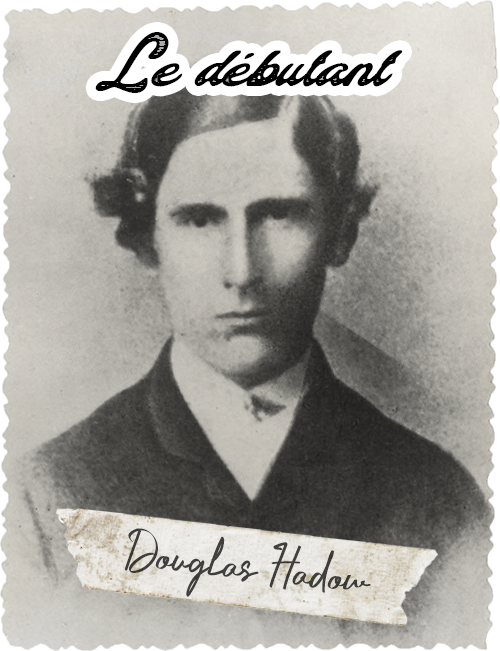
<style>
.page{position:relative;width:500px;height:651px}
.page>*{position:absolute;margin:0}
.t1{font:54.2px "ColinasPersonalUse-Regular";color:#000000}
.t2{font:54.2px "CrustaceansSignatureDEMO-Reg";color:#403f3d}
</style>
<div class="page">
<p class="t1" style="left:95px;top:32px;width:308px;height:61px">Le débutant</p>
<p class="t2" style="left:124px;top:528px;width:247px;height:69px;rotate:6deg">Douglas Hadow</p>
</div>
